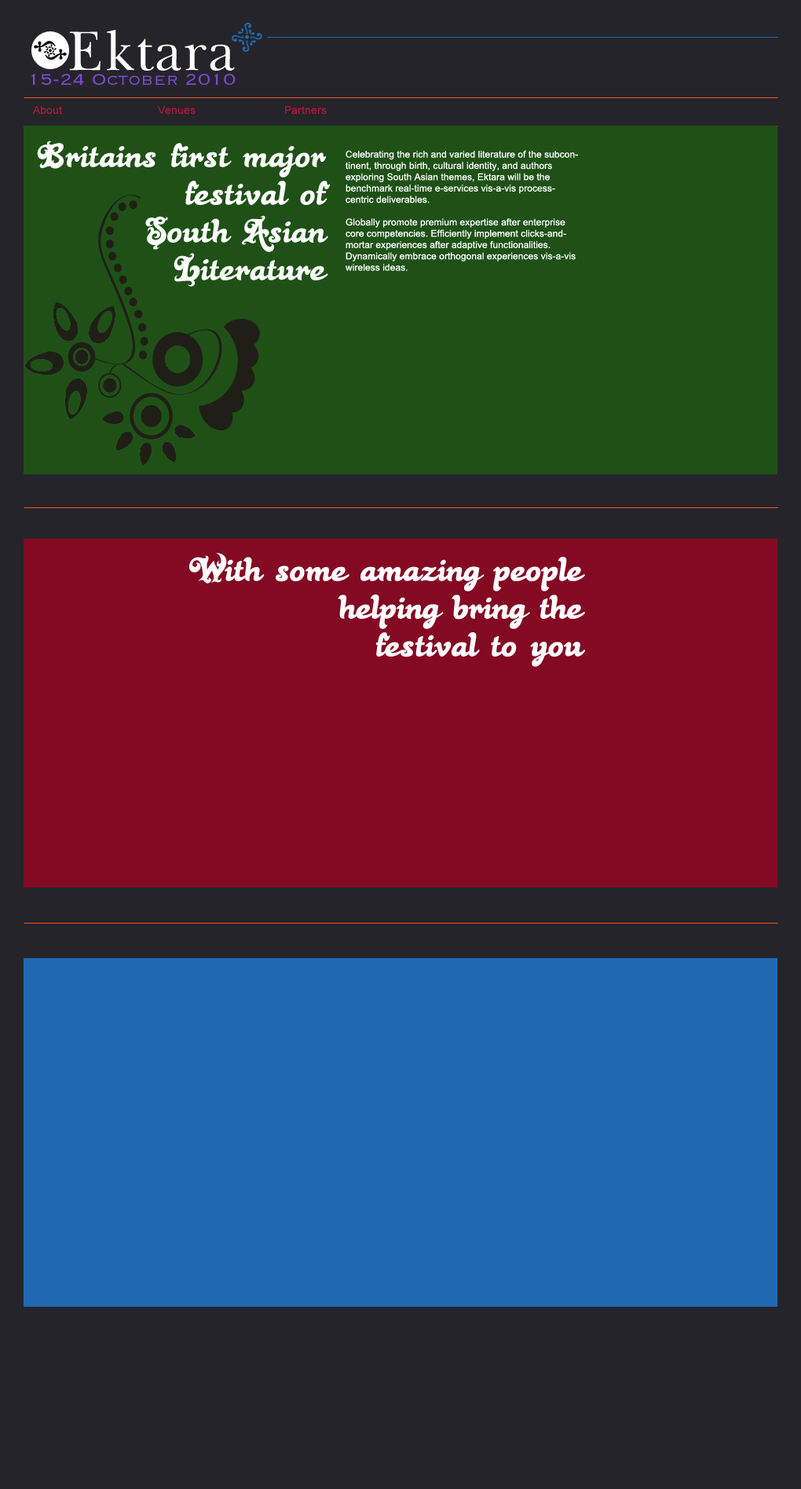
<style>
.page{position:relative;width:801px;height:1489px;background:#25242b}
.page>*{position:absolute;margin:0}
.t1{font:56.5px "BaskervilleGreek-Upright";color:#ffffff}
.t2{font:20.4px "Copperplate-Light";letter-spacing:0.005em;color:#7b4bd2}
.t3{font:11px "ArialMT";color:#c4153a}
.t4{font:37.7px/37.7px "BlackRose";letter-spacing:0.005em;color:#ffffff}
.t5{font:9.4px "ArialMT";letter-spacing:0.005em;color:#ffffff}
</style>
<div class="page">
<p class="t1" style="left:69px;top:30px;width:166px;height:41px">Ektara</p>
<p class="t2" style="left:31px;top:73px;width:205px;height:13px">15-24 October 2010</p>
<p class="t3" style="left:33px;top:106px;width:29px;height:8px">About</p>
<p class="t3" style="left:158px;top:106px;width:38px;height:8px">Venues</p>
<p class="t3" style="left:285px;top:106px;width:42px;height:8px">Partners</p>
<p class="t4" style="left:37px;top:141px;width:293px;height:146px;text-align:right">Britains first major<br>festival of<br>South Asian<br>Literature</p>
<p class="t5" style="left:346px;top:150px;width:232px;height:121px">Celebrating the rich and varied literature of the subcontinent, through birth, cultural identity, and authors exploring South Asian themes, Ektara will be the benchmark real-time e-services vis-a-vis process-centric deliverables. <br><br>Globally promote premium expertise after enterprise core competencies. Efficiently implement clicks-and-mortar experiences after adaptive functionalities. Dynamically embrace orthogonal experiences vis-a-vis wireless ideas.</p>
<p class="t4" style="left:189px;top:553px;width:397px;height:114px;text-align:right">With some amazing people<br>helping bring the<br>festival to you</p>
</div>
